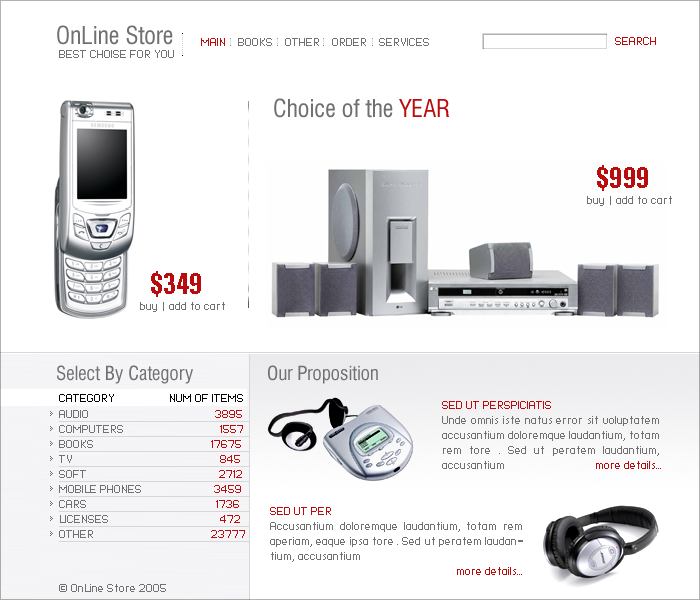
<style>
.page{position:relative;width:700px;height:600px;background:#ffffff}
.page>*{position:absolute;margin:0}
.t1{font:24px "Swiss721BT-RomanCondensed";color:#707072}
.t2{font:9px "Standard0755";color:#707072;text-transform:uppercase}
.t3{font:9px "Standard0755";color:#ba0c0c;text-transform:uppercase}
.t4{font:24px "Swiss721BT-RomanCondensed";color:#ba0c0c}
.t5{font:30px "ZurichBT-BoldExtraCondensed";color:#ba0c0c;text-transform:uppercase}
.t6{font:9px "Standard0755";color:#707072}
.t7{font:19px "Swiss721BT-RomanCondensed";color:#707072}
.t8{font:9px "Standard0755";color:#000000}
.t9{font:9px/15px "Standard0755";color:#707072}
.t10{font:9px/15px "Standard0755";color:#ba0c0c;text-transform:uppercase}
.t11{font:9px/15px "Standard0755";color:#ba0c0c}
</style>
<div class="page">
<p class="t1" style="left:57px;top:25px;width:116px;height:20px">OnLine Store</p>
<p class="t2" style="left:201px;top:38px;width:228px;height:8px"><span class="t3">main   </span> books    other    order    services</p>
<p class="t3" style="left:615px;top:37px;width:41px;height:8px">search</p>
<p class="t2" style="left:59px;top:50px;width:115px;height:8px">best choise for you</p>
<p class="t1" style="left:274px;top:98px;width:176px;height:20px">Choice of the <span class="t4">YEAR</span></p>
<p class="t5" style="left:597px;top:165px;width:51px;height:26px">$999</p>
<p class="t6" style="left:587px;top:196px;width:85px;height:10px">buy | add to cart</p>
<p class="t5" style="left:151px;top:271px;width:50px;height:26px">$349</p>
<p class="t6" style="left:140px;top:302px;width:85px;height:10px">buy | add to cart</p>
<p class="t7" style="left:57px;top:365px;width:136px;height:19px">Select By Category</p>
<p class="t7" style="left:268px;top:365px;width:110px;height:19px">Our Proposition</p>
<p class="t8" style="left:59px;top:394px;width:184px;height:8px">CATEGORY                  NUM OF ITEMS</p>
<p class="t9" style="left:442px;top:401px;width:219px;height:68px;text-align:justify"><span class="t10">Sed ut perspiciatis<br></span>Unde omnis iste natus error sit voluptatem accusantium doloremque laudantium, totam rem tore . Sed ut peratem laudantium, accusantium                              <span class="t11">more details...</span></p>
<p class="t9" style="left:59px;top:410px;width:186px;height:128px">AUDIO                                         <span class="t11"> 3895<br></span>COMPUTERS                                <span class="t11">1557<br></span>BOOKS                      <span class="t11">                 17675<br></span>TV                       <span class="t11">                          845<br></span>SOFT                       <span class="t11">                     2712<br></span>MOBILE PHONES             <span class="t11">           3459<br></span>CARS                                <span class="t11">           1736<br></span>LICENSES                          <span class="t11">           472<br></span>OTHER                            <span class="t11">           23777</span></p>
<p class="t9" style="left:270px;top:507px;width:253px;height:68px;text-align:justify"><span class="t10">Sed ut per<br></span>Accusantium doloremque laudantium, totam rem aperiam, eaque ipsa tore . Sed ut peratem laudantium, accusantium<br>                                                              <span class="t11">more details...</span></p>
<p class="t6" style="left:59px;top:584px;width:107px;height:8px">© OnLine Store 2005</p>
</div>
